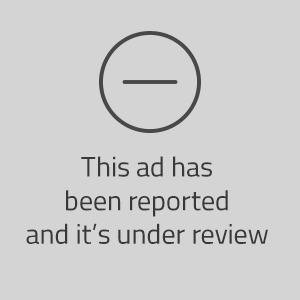
<style>
.page{position:relative;width:300px;height:300px;background:#d4d4d4}
.page>*{position:absolute;margin:0}
.t1{font:28px "Titillium-Regular";color:#393939}
</style>
<div class="page">
<p class="t1" style="left:26px;top:156px;width:242px;height:88px;text-align:center">This ad has<br>been reported<br>and it’s under review</p>
</div>
